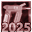
<style>
.page{position:relative;width:32px;height:32px}
.page>*{position:absolute;margin:0}
.t1{font:12px "MicrosoftYaHeiUI-Bold"}
</style>
<div class="page">
<p class="t1" style="left:1px;top:22px;width:30px;height:11px">2025</p>
</div>
